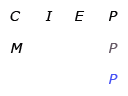
<style>
.page{position:relative;width:128px;height:96px;background:#ffffff}
.page>*{position:absolute;margin:0}
.t1{font:14px "Verdana-Italic";color:#060506}
.t2{font:14px "Verdana-Italic";color:#665a66}
.t3{font:14px "Verdana-Italic";color:#4753f5}
</style>
<div class="page">
<p class="t1" style="left:10px;top:11px;width:11px;height:10px">C</p>
<p class="t1" style="left:45px;top:11px;width:8px;height:10px">I</p>
<p class="t1" style="left:75px;top:11px;width:10px;height:10px">E</p>
<p class="t1" style="left:109px;top:11px;width:9px;height:10px">P</p>
<p class="t1" style="left:10px;top:43px;width:13px;height:10px">M</p>
<p class="t2" style="left:109px;top:43px;width:9px;height:10px">P</p>
<p class="t3" style="left:109px;top:74px;width:9px;height:10px">P</p>
</div>
